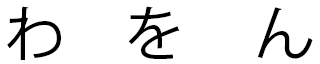
<style>
.page{position:relative;width:320px;height:64px;background:#ffffff}
.page>*{position:absolute;margin:0}
.t1{font:60px "KozGoPr6N-Regular";color:#000000}
</style>
<div class="page">
<p class="t1" style="left:7px;top:6px;width:306px;height:54px">わ　を 　ん</p>
</div>
